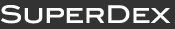
<style>
.page{position:relative;width:175px;height:29px;background:#333333}
.page>*{position:absolute;margin:0}
.t1{font:24px "BlairMdITCTTMedium";color:#ffffff}
</style>
<div class="page">
<p class="t1" style="left:1px;top:5px;width:170px;height:19px">SuperDex</p>
</div>
